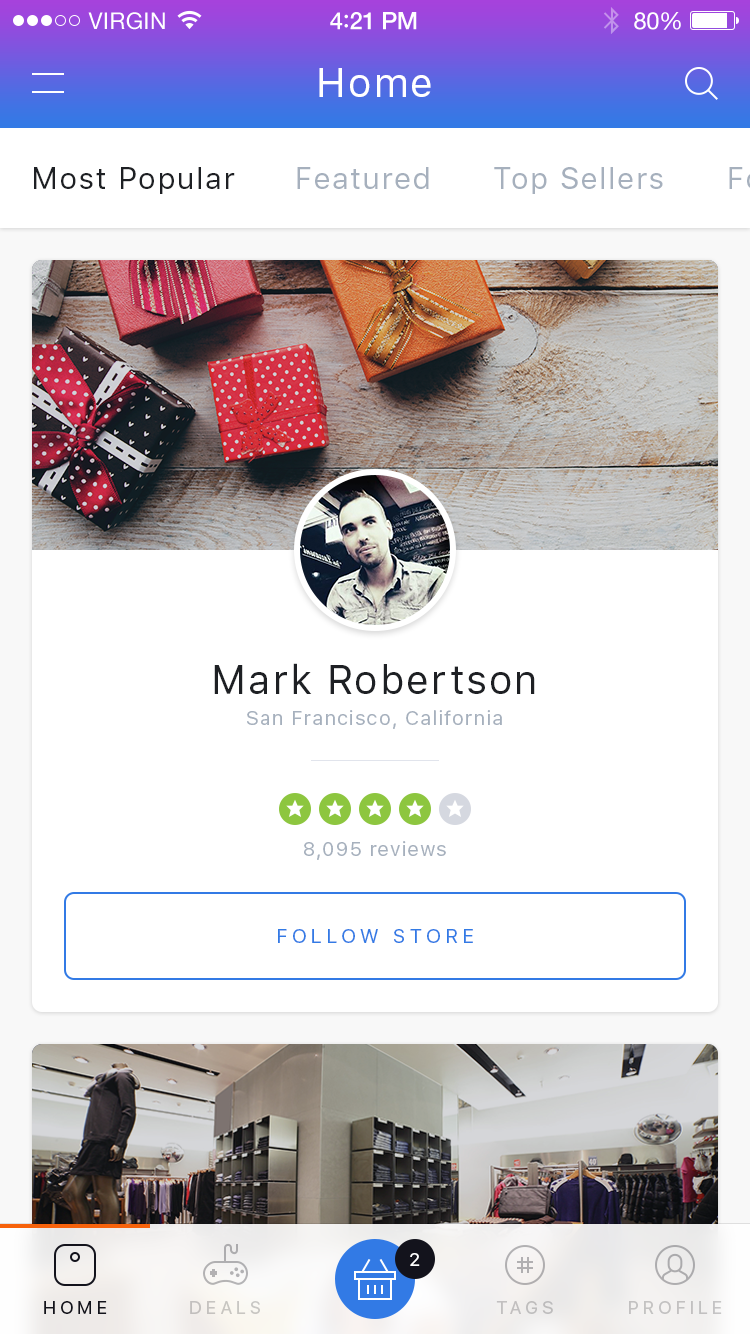
<style>
.page{position:relative;width:750px;height:1334px;background:#ffffff}
.page>*{position:absolute;margin:0}
.t1{font:40px "SFUIText-Regular";letter-spacing:0.05em;color:#ffffff}
.t2{font:30px "SFUIText-Regular";letter-spacing:0.05em;color:#1e2024}
.t3{font:30px "SFUIText-Regular";letter-spacing:0.05em;color:#a6b0bd}
.t4{font:40px "SFUIText-Regular";letter-spacing:0.05em;color:#1e2024}
.t5{font:20px "SFUIText-Regular";letter-spacing:0.05em;color:#a6b0bd}
.t6{font:20px "SFUIText-Regular";letter-spacing:0.2em;color:#327ae5;text-transform:uppercase}
.t7{font:18px "SFUIText-Regular";color:#ffffff;text-transform:uppercase}
.t8{font:18px "SFUIText-Regular";letter-spacing:0.2em;color:#13131c;text-transform:uppercase}
.t9{font:18px "SFUIText-Regular";letter-spacing:0.2em;color:#c7c5c1;text-transform:uppercase}
.t10{font:18px "SFUIText-Regular";letter-spacing:0.2em;color:#c0bfbf;text-transform:uppercase}
.t11{font:18px "SFUIText-Regular";letter-spacing:0.2em;color:#c3c2c1;text-transform:uppercase}
</style>
<div class="page">
<p class="t1" style="left:319px;top:68px;width:112px;height:29px">Home</p>
<p class="t2" style="left:34px;top:167px;width:201px;height:27px">Most Popular</p>
<p class="t3" style="left:297px;top:167px;width:132px;height:22px">Featured</p>
<p class="t3" style="left:494px;top:167px;width:169px;height:27px">Top Sellers</p>
<p class="t4" style="left:214px;top:663px;width:321px;height:31px">Mark Robertson</p>
<p class="t5" style="left:247px;top:710px;width:255px;height:19px">San Francisco, California</p>
<p class="t5" style="left:304px;top:841px;width:142px;height:19px">8,095 reviews</p>
<p class="t6" style="left:278px;top:929px;width:195px;height:14px">follow store</p>
<p class="t7" style="left:410px;top:1253px;width:10px;height:13px">2</p>
<p class="t8" style="left:44px;top:1301px;width:63px;height:13px">home</p>
<p class="t9" style="left:190px;top:1301px;width:70px;height:13px">deals</p>
<p class="t10" style="left:496px;top:1301px;width:57px;height:13px">tags</p>
<p class="t11" style="left:629px;top:1301px;width:93px;height:13px">profile</p>
</div>
